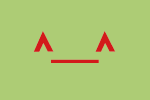
<style>
.page{position:relative;width:150px;height:100px;background:#adcc75}
.page>*{position:absolute;margin:0}
.t1{font:40px "Monod-Regular";letter-spacing:-0.17em;color:#d21a1a}
</style>
<div class="page">
<p class="t1" style="left:33px;top:31px;width:83px;height:32px">^_^</p>
<p class="t1" style="left:33px;top:31px;width:83px;height:32px">^_^</p>
</div>
